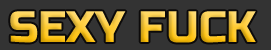
<style>
.page{position:relative;width:271px;height:50px;background:#333333}
.page>*{position:absolute;margin:0}
.t1{font:44px "RussoOne-Regular"}
</style>
<div class="page">
<p class="t1" style="left:10px;top:11px;width:246px;height:32px">SEXY FUCK</p>
</div>
